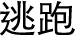
<style>
.page{position:relative;width:75px;height:36px;background:#ffffff}
.page>*{position:absolute;margin:0}
.t1{font:38.9px "STHeitiTC-Light";color:#000000}
</style>
<div class="page">
<p class="t1" style="left:0px;top:0px;width:75px;height:36px">逃跑</p>
</div>
